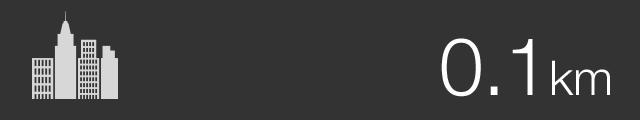
<style>
.page{position:relative;width:640px;height:120px;background:#333333}
.page>*{position:absolute;margin:0}
.t1{font:80px "HelveticaNeue-Light";color:#ffffff}
.t2{font:48px "HelveticaNeue-Light";color:#ffffff}
</style>
<div class="page">
<p class="t1" style="left:441px;top:38px;width:169px;height:59px">0.1<span class="t2">km</span></p>
</div>
